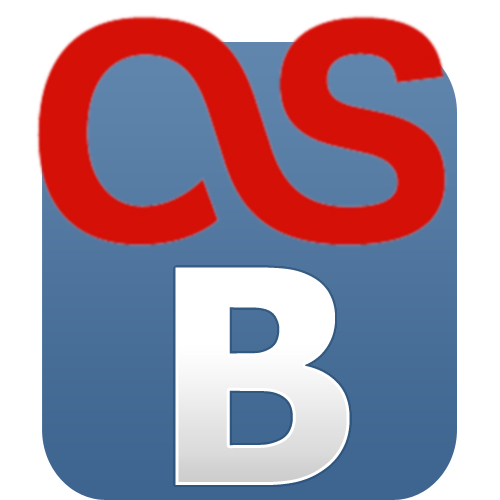
<style>
.page{position:relative;width:500px;height:500px;background:#ffffff}
.page>*{position:absolute;margin:0}
.t1{font:299.2px "Tahoma-Bold";color:#ffffff}
</style>
<div class="page">
<p class="t1" style="left:175px;top:267px;width:175px;height:218px">В</p>
</div>
